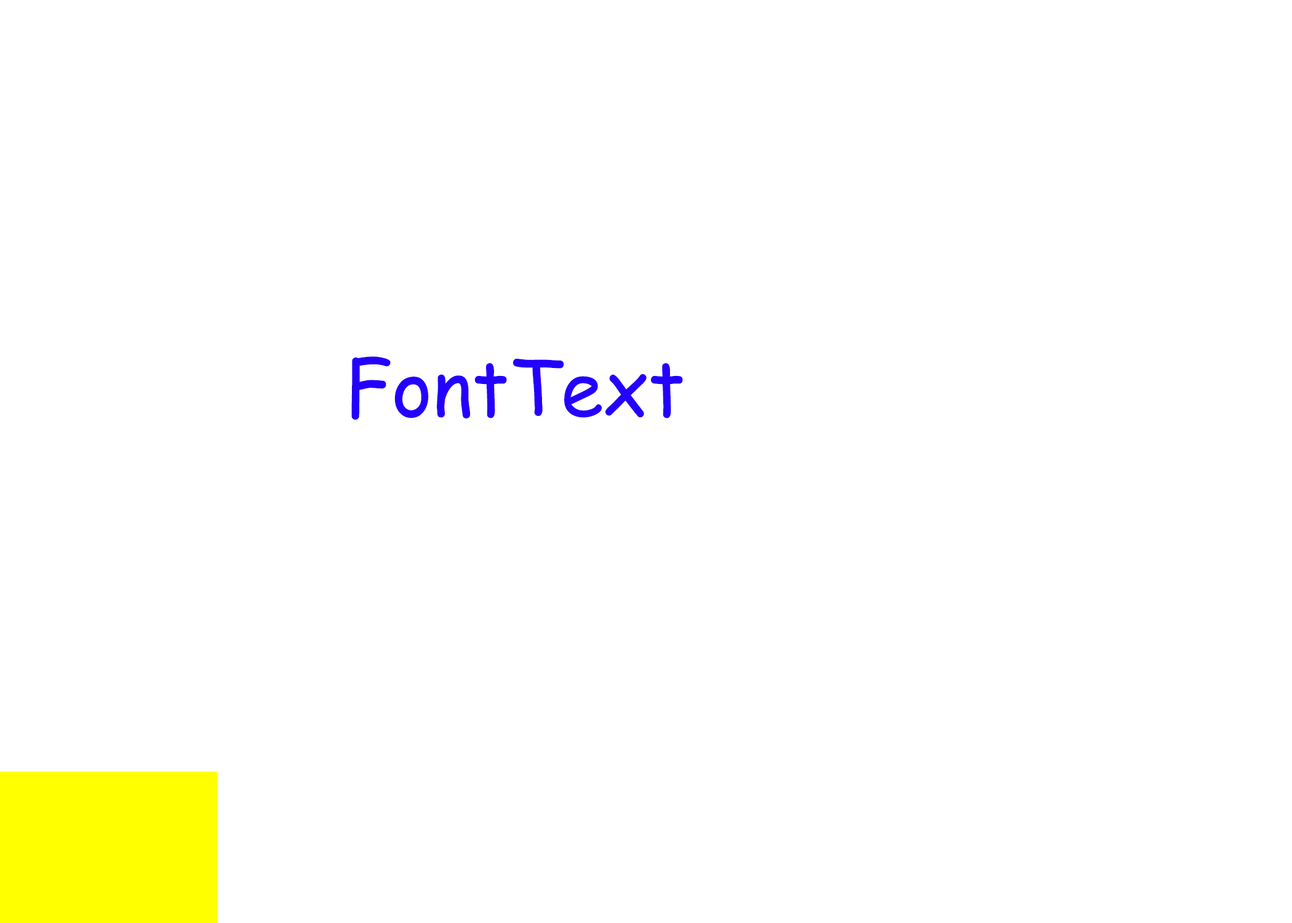
<style>
.page{position:relative;width:1292px;height:923px;background:#ffffff}
.page>*{position:absolute;margin:0}
.t1{font:76.9px "ComicSansMS";color:#2400fe}
</style>
<div class="page">
<p class="t1" style="left:351px;top:356px;width:332px;height:64px">FontText</p>
</div>
